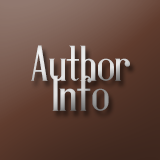
<style>
.page{position:relative;width:160px;height:160px}
.page>*{position:absolute;margin:0}
.t1{font:50px/30px "AntiqueBookCover"}
</style>
<div class="page">
<p class="t1" style="left:31px;top:45px;width:99px;height:66px;text-align:center">Author<br>Info</p>
</div>
